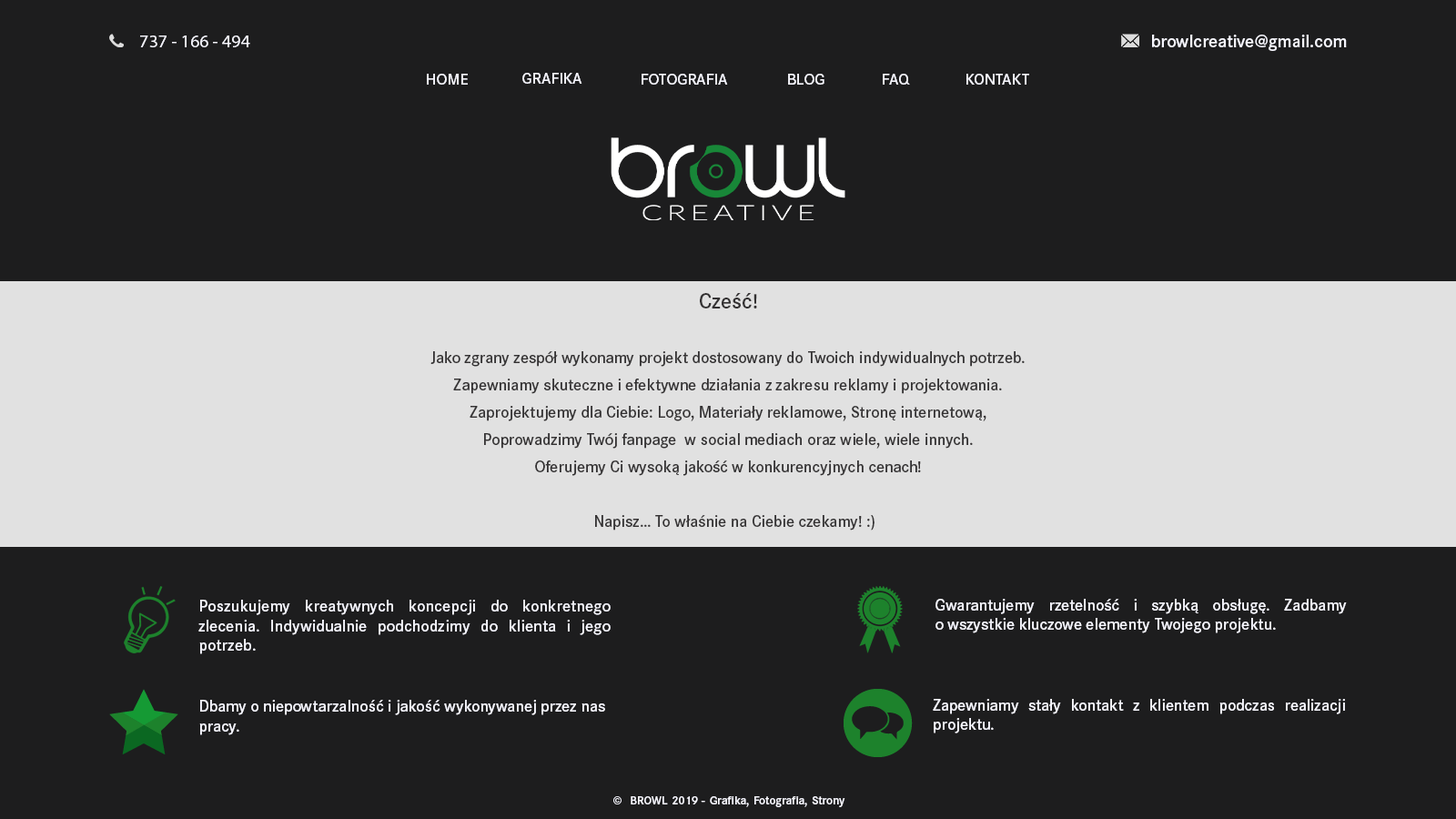
<style>
.page{position:relative;width:1456px;height:819px;background:#1d1d1e}
.page>*{position:absolute;margin:0}
.t1{font:18.2px "MyriadPro-Regular";color:#f7f7ff}
.t2{font:18.2px "CorporateSPro-Demi";color:#f7f7ff}
.t3{font:16.2px "CorporateSPro-Demi";color:#f7f7ff}
.t4{font:16.4px/27.3px "CorporateSPro-Demi";color:#333132}
.t5{font:21.8px/27.3px "CorporateSPro-Demi";color:#333132}
.t6{font:16.4px "CorporateSPro-Demi";letter-spacing:0.01em;color:#f7f7ff}
.t7{font:16.4px "CorporateSPro-Demi";color:#f7f7ff}
.t8{font:12px "CorporateSPro-Demi";color:#f7f7ff}
</style>
<div class="page">
<p class="t1" style="left:140px;top:35px;width:110px;height:12px">737 - 166 - 494</p>
<p class="t2" style="left:1152px;top:35px;width:195px;height:16px">browlcreative@gmail.com</p>
<p class="t3" style="left:427px;top:74px;width:41px;height:11px;text-align:justify">HOME<br>v</p>
<p class="t3" style="left:522px;top:73px;width:60px;height:11px">GRAFIKA</p>
<p class="t3" style="left:642px;top:74px;width:86px;height:11px">FOTOGRAFIA</p>
<p class="t3" style="left:788px;top:74px;width:36px;height:11px">BLOG</p>
<p class="t3" style="left:883px;top:74px;width:27px;height:11px">FAQ</p>
<p class="t3" style="left:966px;top:74px;width:63px;height:11px">KONTAKT</p>
<p class="t4" style="left:430px;top:293px;width:595px;height:238px;text-align:center"><span class="t5">Cześć!<br><br></span>Jako zgrany zespół wykonamy projekt dostosowany do Twoich indywidualnych potrzeb. <br>Zapewniamy skuteczne i efektywne działania z zakresu reklamy i projektowania. <br>Zaprojektujemy dla Ciebie: Logo, Materiały reklamowe, Stronę internetową, <br>Poprowadzimy Twój fanpage  w social mediach oraz wiele, wiele innych.<br>Oferujemy Ci wysoką jakość w konkurencyjnych cenach!<br>                     <br>   Napisz… To właśnie na Ciebie czekamy! :)</p>
<p class="t6" style="left:198px;top:600px;width:413px;height:54px;text-align:justify">Poszukujemy kreatywnych koncepcji do konkretnego <br>zlecenia. Indywidualnie podchodzimy do klienta i jego potrzeb.</p>
<p class="t7" style="left:935px;top:599px;width:412px;height:34px;text-align:justify">Gwarantujemy rzetelność i szybką obsługę. Zadbamy <br>o wszystkie kluczowe elementy Twojego projektu.</p>
<p class="t7" style="left:199px;top:700px;width:406px;height:35px">Dbamy o niepowtarzalność i jakość wykonywanej przez nas pracy.</p>
<p class="t7" style="left:933px;top:699px;width:412px;height:34px;text-align:justify">Zapewniamy stały kontakt z klientem podczas realizacji <br>projektu.</p>
<p class="t8" style="left:613px;top:796px;width:232px;height:11px;text-align:justify">©  BROWL 2019 - Grafika, Fotografia, Strony www<br>v</p>
</div>
